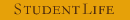
<style>
.page{position:relative;width:130px;height:20px;background:#e6a109}
.page>*{position:absolute;margin:0}
.t1{font:12.5px "Garamond";color:#4c290d}
.t2{font:16.7px "Garamond";color:#4c290d}
</style>
<div class="page">
<p class="t1" style="left:14px;top:3px;width:100px;height:12px"><span class="t2">S  </span>T U D E N T <span class="t2">L </span>I F E</p>
</div>
